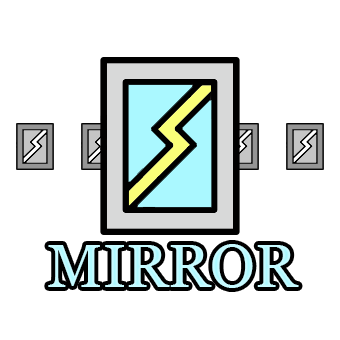
<style>
.page{position:relative;width:340px;height:340px;background:#ffffff}
.page>*{position:absolute;margin:0}
.t1{font:60px "Georgia";color:#c7faff}
</style>
<div class="page">
<p class="t1" style="left:48px;top:244px;width:251px;height:44px">MIRROR</p>
</div>
